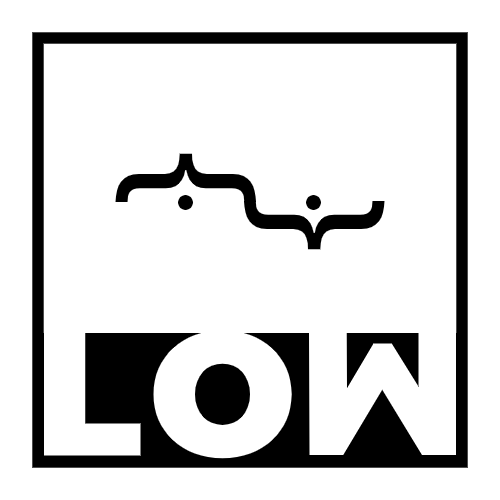
<style>
.page{position:relative;width:500px;height:500px;background:#ffffff}
.page>*{position:absolute;margin:0}
.t1{font:175px "Montserrat-Black";color:#ffffff}
</style>
<div class="page">
<p class="t1" style="left:43px;top:333px;width:98px;height:123px">L</p>
<p class="t1" style="left:153px;top:330px;width:139px;height:129px">O</p>
<p class="t1" style="left:309px;top:332px;width:147px;height:123px;rotate:180deg">M</p>
</div>
